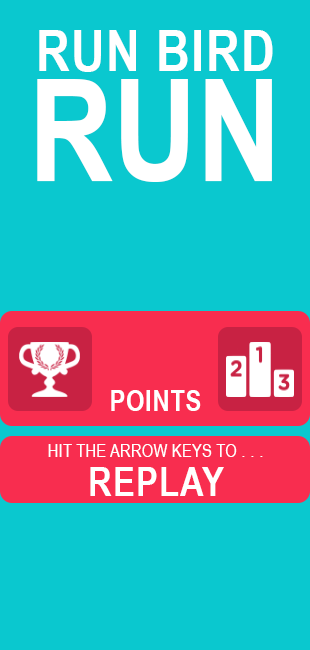
<style>
.page{position:relative;width:310px;height:650px;background:#0ac8cf}
.page>*{position:absolute;margin:0}
.t1{font:57.3px "ArialNarrow-Bold";letter-spacing:0.025em;color:#ffffff}
.t2{font:141.7px "ArialNarrow-Bold";letter-spacing:0.001em;color:#ffffff}
.t3{font:28.9px "ArialNarrow-Bold";letter-spacing:0.025em;color:#ffffff}
.t4{font:17.6px "ArialNarrow";letter-spacing:0.025em;color:#ffffff}
.t5{font:40.3px "ArialNarrow-Bold";letter-spacing:0.025em;color:#ffffff}
</style>
<div class="page">
<p class="t1" style="left:39px;top:30px;width:234px;height:42px">RUN BIRD</p>
<p class="t2" style="left:37px;top:79px;width:235px;height:103px">RUN</p>
<p class="t3" style="left:111px;top:390px;width:90px;height:21px">POINTS</p>
<p class="t4" style="left:48px;top:444px;width:215px;height:13px">HIT THE ARROW KEYS TO . . .</p>
<p class="t5" style="left:90px;top:467px;width:134px;height:29px">REPLAY</p>
</div>
